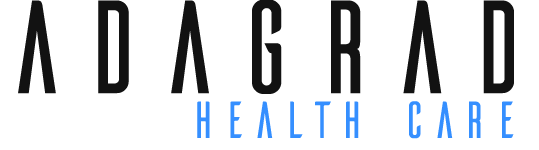
<style>
.page{position:relative;width:539px;height:150px;background:#ffffff}
.page>*{position:absolute;margin:0}
.t1{font:132px "Ailerons-Regular";color:#121212}
.t2{font:52px "Ailerons-Regular";color:#358fff}
</style>
<div class="page">
<p class="t1" style="left:18px;top:0px;width:496px;height:94px">adagrad</p>
<p class="t2" style="left:197px;top:101px;width:317px;height:38px">Health Care</p>
</div>
